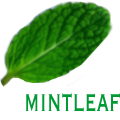
<style>
.page{position:relative;width:120px;height:120px;background:#ffffff}
.page>*{position:absolute;margin:0}
.t1{font:38.2px "Copperplate";color:#009933;scale:0.57 1}
</style>
<div class="page">
<p class="t1" style="left:26px;top:93px;width:94px;height:19px">mintleaf</p>
</div>
